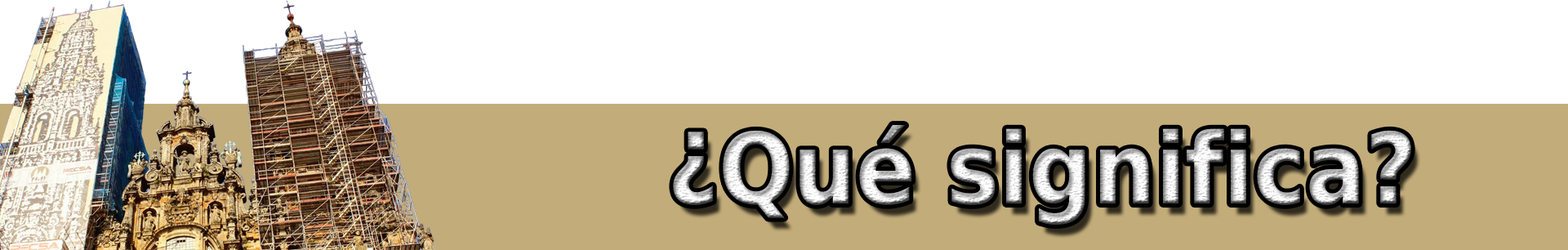
<style>
.page{position:relative;width:1568px;height:250px;background:#ffffff}
.page>*{position:absolute;margin:0}
.t1{font:98px "DejaVuSansCondensed-Bold"}
</style>
<div class="page">
<p class="t1" style="left:673px;top:125px;width:738px;height:100px">¿Qué significa?</p>
</div>
